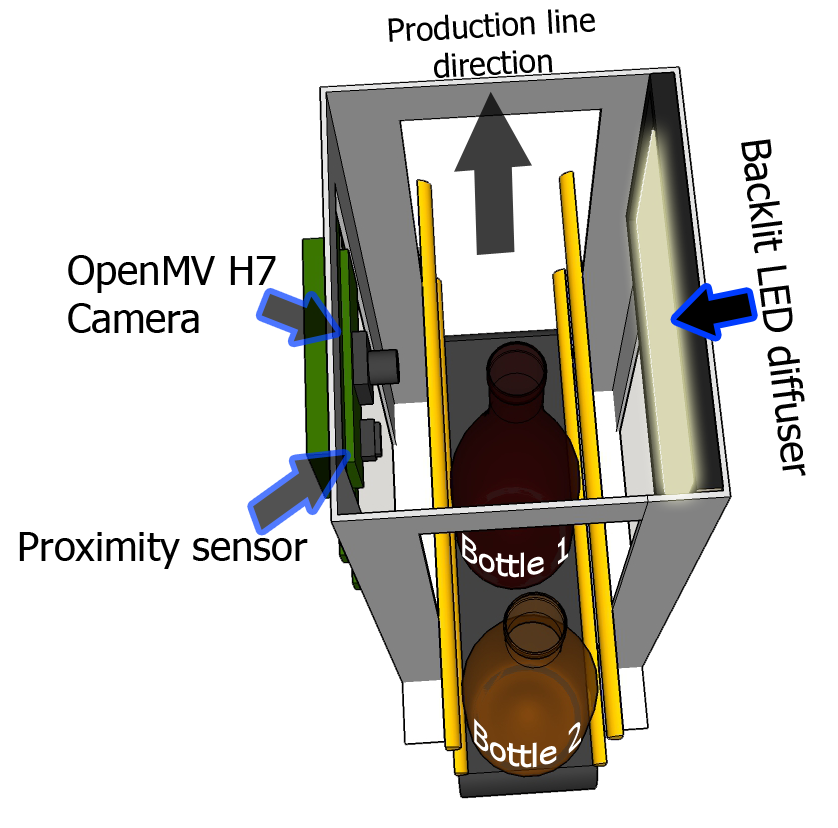
<style>
.page{position:relative;width:838px;height:828px;background:#ffffff}
.page>*{position:absolute;margin:0}
.t1{font:32px "Tahoma";color:#000000}
.t2{font:40px "Tahoma";color:#000000}
.t3{font:32px "Tahoma";color:#ffffff}
</style>
<div class="page">
<p class="t1" style="left:388px;top:9px;width:207px;height:69px;text-align:center;rotate:-3deg">Production line<br>direction</p>
<p class="t2" style="left:741px;top:139px;width:65px;height:337px;rotate:83deg">Backlit LED diffuser</p>
<p class="t2" style="left:68px;top:255px;width:208px;height:78px">OpenMV H7<br>Camera</p>
<p class="t2" style="left:19px;top:532px;width:289px;height:37px">Proximity sensor</p>
<p class="t3" style="left:462px;top:533px;width:106px;height:45px">Bottle 1</p>
<p class="t3" style="left:474px;top:718px;width:107px;height:50px">Bottle 2</p>
</div>
